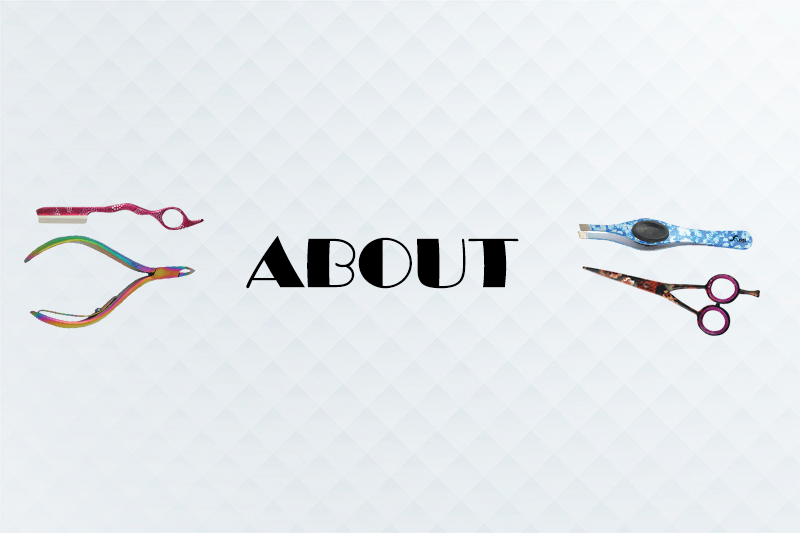
<style>
.page{position:relative;width:800px;height:533px}
.page>*{position:absolute;margin:0}
.t1{font:72px "Broadway";color:#000000}
</style>
<div class="page">
<p class="t1" style="left:246px;top:235px;width:273px;height:54px">ABOUT</p>
</div>
